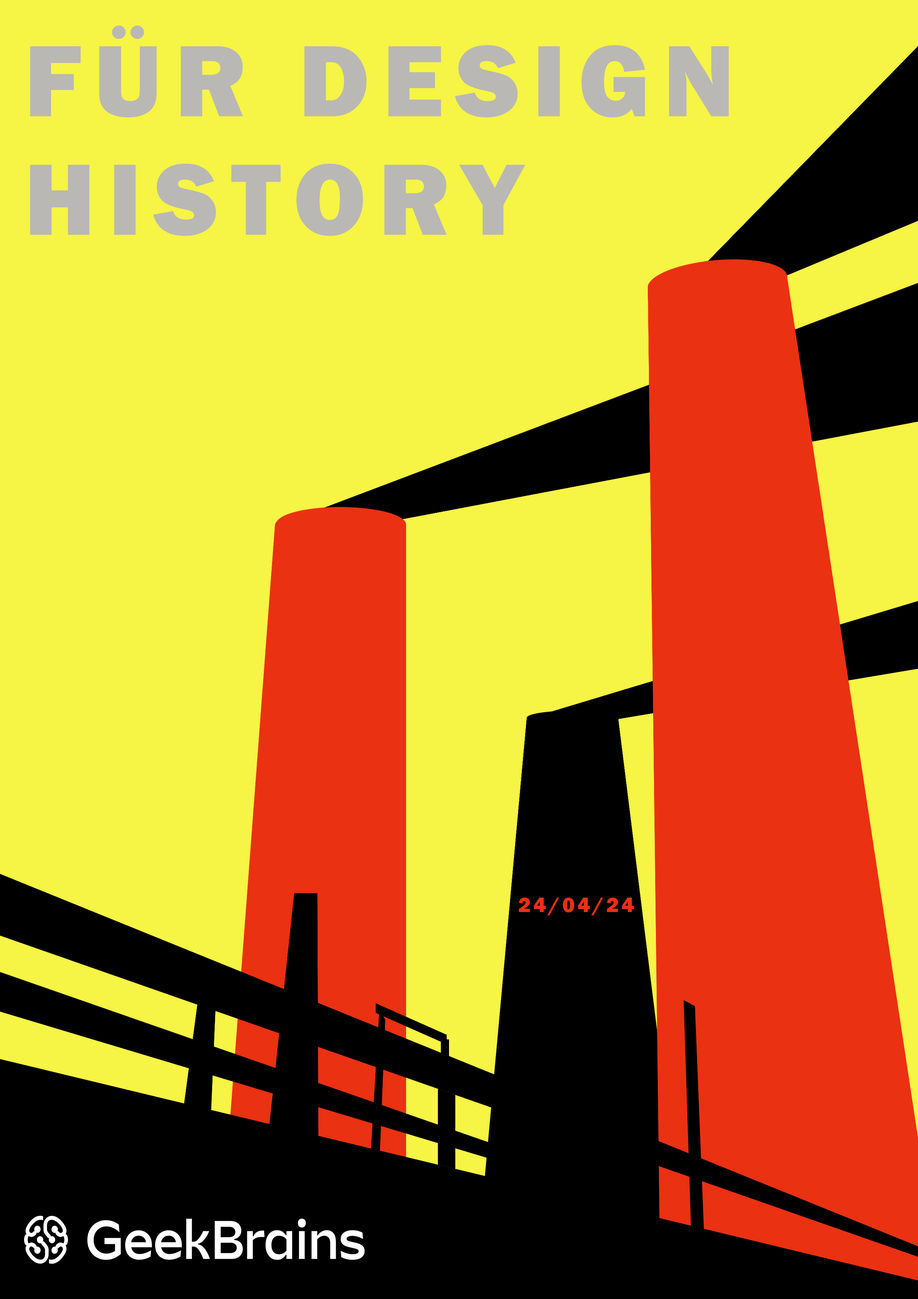
<style>
.page{position:relative;width:918px;height:1299px;background:#f6f444}
.page>*{position:absolute;margin:0}
.t1{font:104.9px "FranklinGothic-Heavy";letter-spacing:0.12em;color:#b9b8b4;text-transform:uppercase}
.t2{font:21.6px "FranklinGothic-Heavy";letter-spacing:0.12em;color:#ea3111;text-transform:uppercase}
</style>
<div class="page">
<p class="t1" style="left:30px;top:26px;width:699px;height:210px">für dESIGN<br>history</p>
<p class="t2" style="left:519px;top:897px;width:115px;height:18px">24/04/24</p>
</div>
